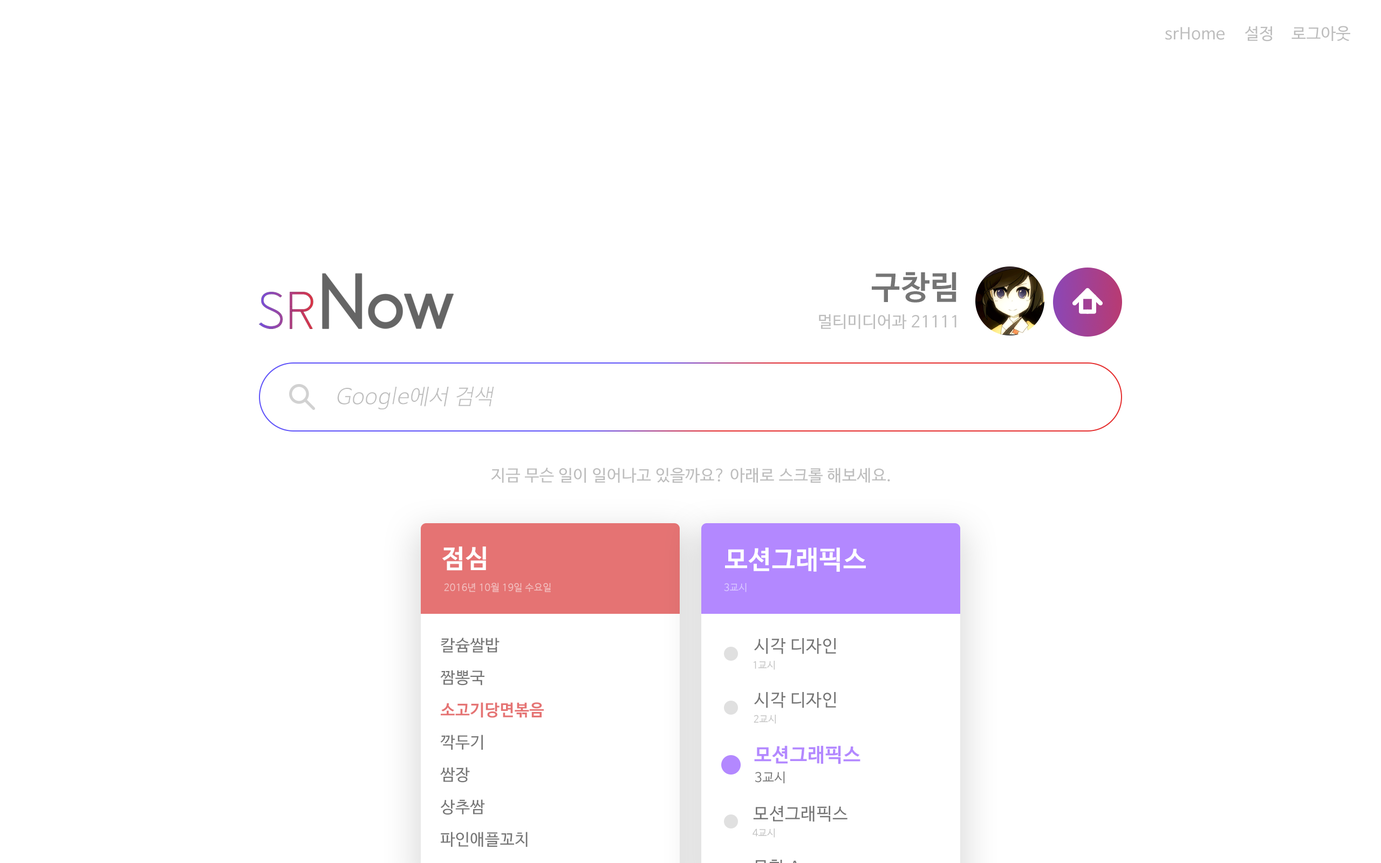
<style>
.page{position:relative;width:1381px;height:863px;background:#ffffff}
.page>*{position:absolute;margin:0}
.t1{font:16.2px "NanumBarunGothic";letter-spacing:0.025em;color:#bdbdbd}
.t2{font:32.4px "NanumBarunGothicBold";letter-spacing:0.025em;color:#757575}
.t3{font:21.6px "NanumBarunGothicLight";letter-spacing:0.025em;color:#bdbdbd;font-style:italic}
.t4{font:25.9px "NanumBarunGothicBold";letter-spacing:0.025em;color:#ffffff}
.t5{font:9.7px "NanumBarunGothic";letter-spacing:0.025em;color:#f2c1c1}
.t6{font:9.7px "NanumBarunGothic";letter-spacing:0.025em;color:#dbc9ff}
.t7{font:16.2px/32.4px "NanumBarunGothic";letter-spacing:0.025em;color:#757575}
.t8{font:16.2px/32.4px "NanumBarunGothicBold";letter-spacing:0.025em;color:#e57373}
.t9{font:17.3px "NanumBarunGothic";letter-spacing:0.025em;color:#757575}
.t10{font:9.7px "NanumBarunGothic";letter-spacing:0.025em;color:#c1c1c1}
.t11{font:19.4px "NanumBarunGothicBold";letter-spacing:0.025em;color:#b388ff}
.t12{font:12.9px "NanumBarunGothic";letter-spacing:0.025em;color:#757575}
</style>
<div class="page">
<p class="t1" style="left:1165px;top:27px;width:60px;height:13px">srHome</p>
<p class="t1" style="left:1245px;top:26px;width:28px;height:16px">설정</p>
<p class="t1" style="left:1292px;top:26px;width:59px;height:15px">로그아웃</p>
<p class="t2" style="left:872px;top:272px;width:85px;height:31px">구창림</p>
<p class="t1" style="left:819px;top:314px;width:138px;height:15px">멀티미디어과 21111</p>
<p class="t3" style="left:337px;top:386px;width:157px;height:24px">Google에서 검색</p>
<p class="t1" style="left:491px;top:468px;width:399px;height:15px">지금 무슨 일이 일어나고 있을까요? 아래로 스크롤 해보세요.</p>
<p class="t4" style="left:442px;top:547px;width:44px;height:24px">점심</p>
<p class="t4" style="left:725px;top:548px;width:141px;height:24px">모션그래픽스</p>
<p class="t5" style="left:444px;top:583px;width:107px;height:9px">2016년 10월 19일 수요일</p>
<p class="t6" style="left:724px;top:583px;width:23px;height:9px">3교시</p>
<p class="t7" style="left:440px;top:638px;width:104px;height:209px">칼슘쌀밥<br>짬뽕국<br><span class="t8">소고기당면볶음<br></span>깍두기<br>쌈장<br>상추쌈<br>파인애플꼬치</p>
<p class="t9" style="left:754px;top:638px;width:82px;height:16px">시각 디자인</p>
<p class="t10" style="left:754px;top:661px;width:21px;height:9px">1교시</p>
<p class="t9" style="left:754px;top:692px;width:82px;height:16px">시각 디자인</p>
<p class="t10" style="left:754px;top:715px;width:22px;height:9px">2교시</p>
<p class="t11" style="left:754px;top:746px;width:107px;height:19px">모션그래픽스</p>
<p class="t12" style="left:755px;top:772px;width:30px;height:12px">3교시</p>
<p class="t9" style="left:753px;top:806px;width:95px;height:16px">모션그래픽스</p>
<p class="t10" style="left:753px;top:829px;width:22px;height:9px">4교시</p>
</div>
